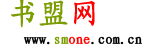
<style>
.page{position:relative;width:145px;height:55px;background:#ffffff}
.page>*{position:absolute;margin:0}
.t1{font:30px "KaiTi_GB2312";color:#7b9d01;font-weight:bold}
.t2{font:30px "KaiTi_GB2312";color:#ff0000;font-weight:bold}
.t3{font:14px "KaiTi_GB2312";color:#000000;font-weight:bold}
.t4{font:14px "KaiTi_GB2312";color:#7b9d01;font-weight:bold}
.t5{font:14px "KaiTi_GB2312";color:#ff0000;font-weight:bold}
</style>
<div class="page">
<p class="t1" style="left:11px;top:0px;width:84px;height:28px">书盟<span class="t2">网</span></p>
<p class="t3" style="left:23px;top:36px;width:119px;height:9px">www.<span class="t4">sm</span><span class="t5">one</span>.com.cn</p>
</div>
